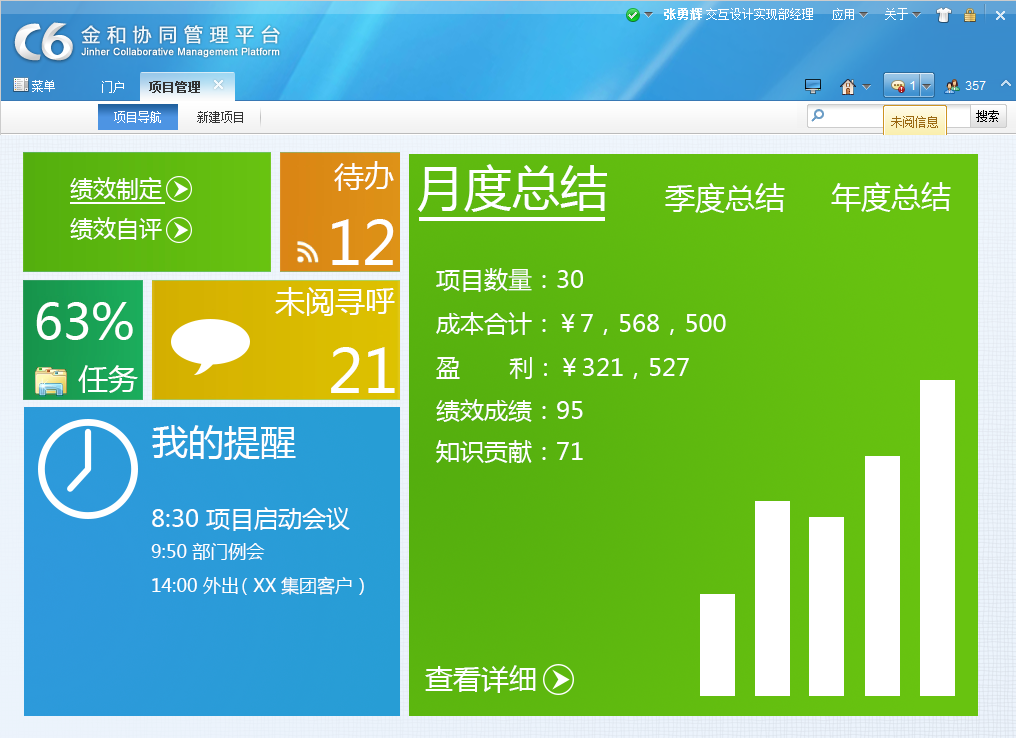
<style>
.page{position:relative;width:1016px;height:738px}
.page>*{position:absolute;margin:0}
.t1{font:30px "MicrosoftYaHei";color:#ffffff}
.t2{font:48px "MicrosoftYaHei";color:#ffffff}
.t3{font:23px "MicrosoftYaHei";color:#ffffff}
.t4{font:60px "MicrosoftYaHei";color:#ffffff}
.t5{font:24px "MicrosoftYaHei";color:#ffffff}
.t6{font:49px "MicrosoftYaHei";color:#ffffff}
.t7{font:36px "MicrosoftYaHei";color:#ffffff}
.t8{font:18px "MicrosoftYaHei";color:#ffffff}
.t9{font:28px "MicrosoftYaHei";color:#ffffff}
</style>
<div class="page">
<p class="t1" style="left:334px;top:161px;width:60px;height:30px">待办</p>
<p class="t2" style="left:417px;top:164px;width:190px;height:48px">月度总结</p>
<p class="t3" style="left:70px;top:177px;width:92px;height:63px">绩效制定<br>绩效自评</p>
<p class="t1" style="left:665px;top:183px;width:120px;height:30px">季度总结</p>
<p class="t1" style="left:831px;top:182px;width:120px;height:30px">年度总结</p>
<p class="t4" style="left:332px;top:219px;width:62px;height:46px">12</p>
<p class="t5" style="left:436px;top:268px;width:147px;height:24px">项目数量：30</p>
<p class="t1" style="left:275px;top:287px;width:120px;height:29px">未阅寻呼</p>
<p class="t6" style="left:36px;top:302px;width:97px;height:38px">63%</p>
<p class="t5" style="left:436px;top:312px;width:290px;height:23px">成本合计：￥7，568，500</p>
<p class="t4" style="left:331px;top:347px;width:64px;height:46px">21</p>
<p class="t1" style="left:78px;top:365px;width:60px;height:28px">任务</p>
<p class="t5" style="left:436px;top:357px;width:253px;height:22px">盈       利：￥321，527</p>
<p class="t5" style="left:436px;top:399px;width:147px;height:23px">绩效成绩：95</p>
<p class="t7" style="left:152px;top:425px;width:144px;height:35px">我的提醒</p>
<p class="t5" style="left:436px;top:440px;width:147px;height:23px">知识贡献：71</p>
<p class="t5" style="left:152px;top:507px;width:198px;height:24px">8:30 项目启动会议</p>
<p class="t8" style="left:151px;top:543px;width:114px;height:17px">9:50 部门例会</p>
<p class="t8" style="left:152px;top:576px;width:212px;height:19px">14:00 外出 （XX集团客户）</p>
<p class="t9" style="left:425px;top:665px;width:111px;height:28px">查看详细</p>
</div>
